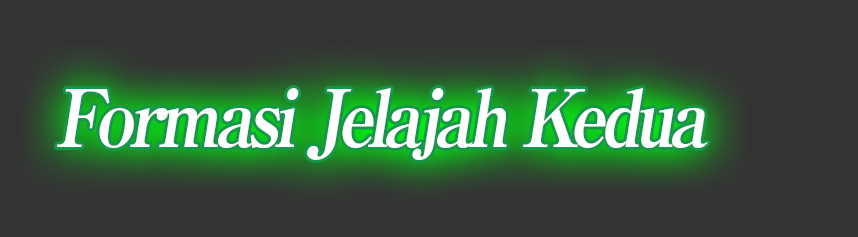
<style>
.page{position:relative;width:858px;height:237px;background:#333333}
.page>*{position:absolute;margin:0}
.t1{font:80px "RyuminPro-ExBold";letter-spacing:-0.08em;color:#ffffff;font-style:italic;scale:0.9 1}
</style>
<div class="page">
<p class="t1" style="left:57px;top:88px;width:651px;height:72px">Formasi Jelajah Kedua</p>
</div>
